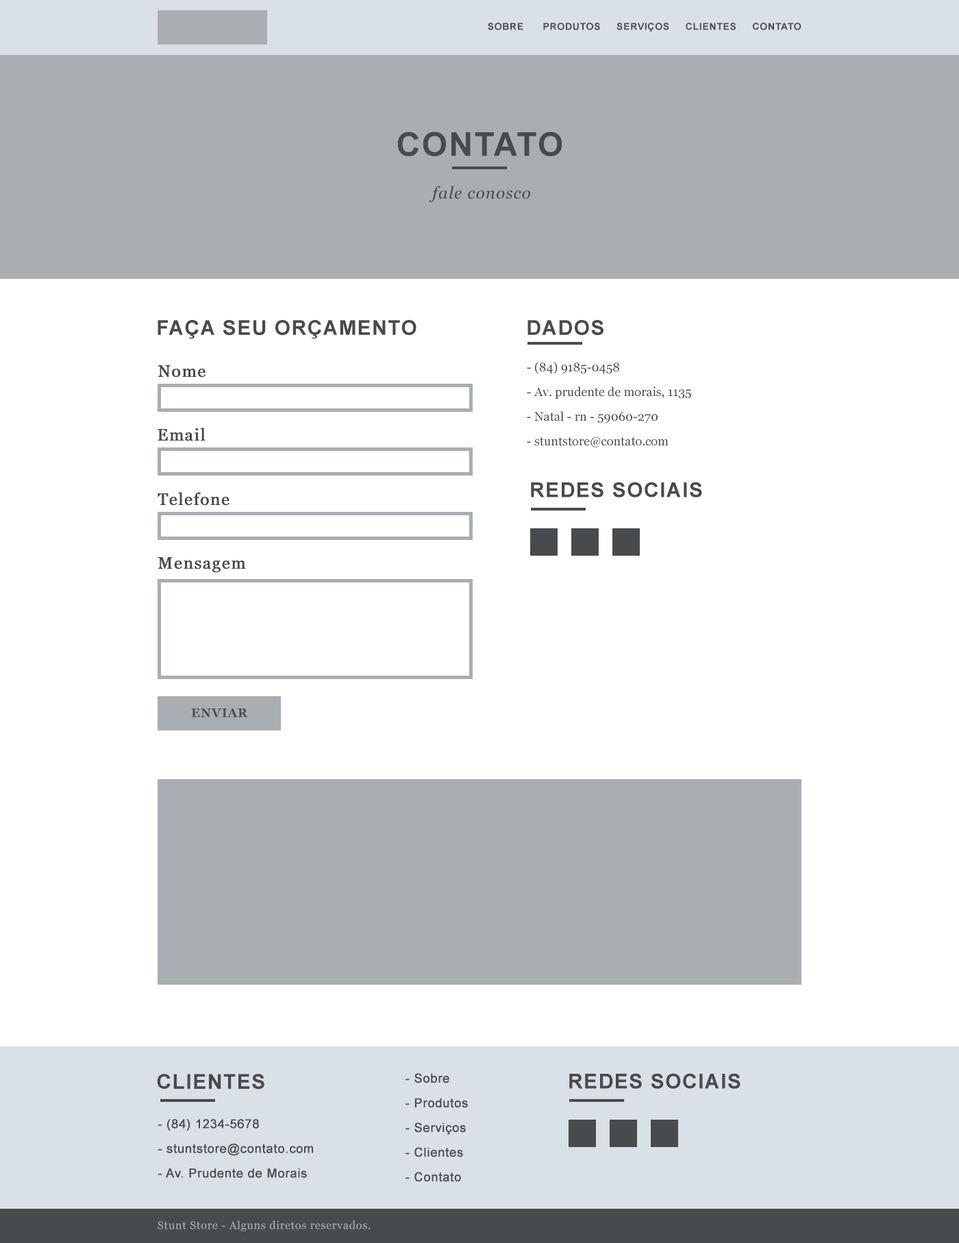
<style>
.page{position:relative;width:959px;height:1243px;background:#ffffff}
.page>*{position:absolute;margin:0}
.t1{font:9.6px "Arial-BoldMT";letter-spacing:0.05em;color:#484b4d;text-transform:uppercase}
.t2{font:32.9px "Arial-BoldMT";letter-spacing:0.05em;color:#484b4d;text-transform:uppercase}
.t3{font:16.4px "Georgia-Italic";letter-spacing:0.05em;color:#484b4d}
.t4{font:20.6px "Arial-BoldMT";letter-spacing:0.05em;color:#484b4d;text-transform:uppercase}
.t5{font:16.4px "Georgia";letter-spacing:0.05em;color:#484b4d;font-weight:bold}
.t6{font:12.3px/24.7px "Georgia";color:#484b4d}
.t7{font:12.3px "Georgia-Bold";letter-spacing:0.05em;color:#484b4d;text-transform:uppercase}
.t8{font:12.3px/24.7px "ArialMT";letter-spacing:0.025em;color:#484b4d;font-weight:bold}
.t9{font:11px "Georgia";letter-spacing:0.05em;color:#a9aeb3}
</style>
<div class="page">
<p class="t1" style="left:488px;top:23px;width:314px;height:9px">Sobre      produtos     serviços     Clientes     contato</p>
<p class="t2" style="left:397px;top:132px;width:166px;height:24px">contato</p>
<p class="t3" style="left:429px;top:186px;width:101px;height:16px">fale conosco</p>
<p class="t4" style="left:158px;top:320px;width:259px;height:19px">Faça seu orçamento</p>
<p class="t4" style="left:528px;top:320px;width:76px;height:15px">dados</p>
<p class="t5" style="left:158px;top:365px;width:48px;height:13px">Nome</p>
<p class="t6" style="left:527px;top:362px;width:164px;height:85px">- (84) 9185-0458<br>- Av. prudente de morais, 1135<br>- Natal - rn - 59060-270<br>- stuntstore@contato.com</p>
<p class="t5" style="left:158px;top:428px;width:48px;height:13px">Email</p>
<p class="t4" style="left:531px;top:482px;width:171px;height:15px">Redes Sociais</p>
<p class="t5" style="left:158px;top:492px;width:72px;height:14px">Telefone</p>
<p class="t5" style="left:158px;top:557px;width:88px;height:16px">Mensagem</p>
<p class="t7" style="left:191px;top:709px;width:57px;height:8px">Enviar</p>
<p class="t4" style="left:157px;top:1074px;width:107px;height:16px">Clientes</p>
<p class="t8" style="left:406px;top:1073px;width:62px;height:109px">- Sobre<br>- Produtos<br>- Serviços<br>- Clientes<br>- Contato</p>
<p class="t4" style="left:569px;top:1073px;width:172px;height:16px">Redes Sociais</p>
<p class="t8" style="left:158px;top:1119px;width:155px;height:59px">- (84) 1234-5678<br>- stuntstore@contato.com<br>- Av. Prudente de Morais</p>
<p class="t9" style="left:158px;top:1220px;width:213px;height:11px">Stunt Store - Alguns diretos reservados.</p>
</div>
